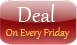
<style>
.page{position:relative;width:77px;height:45px}
.page>*{position:absolute;margin:0}
.t1{font:27.3px "Gabriola";color:#ffffff}
.t2{font:12.7px "Gabriola";color:#ffb13a}
</style>
<div class="page">
<p class="t1" style="left:17px;top:4px;width:39px;height:18px">Deal</p>
<p class="t2" style="left:6px;top:27px;width:64px;height:12px">On Every Friday</p>
</div>
